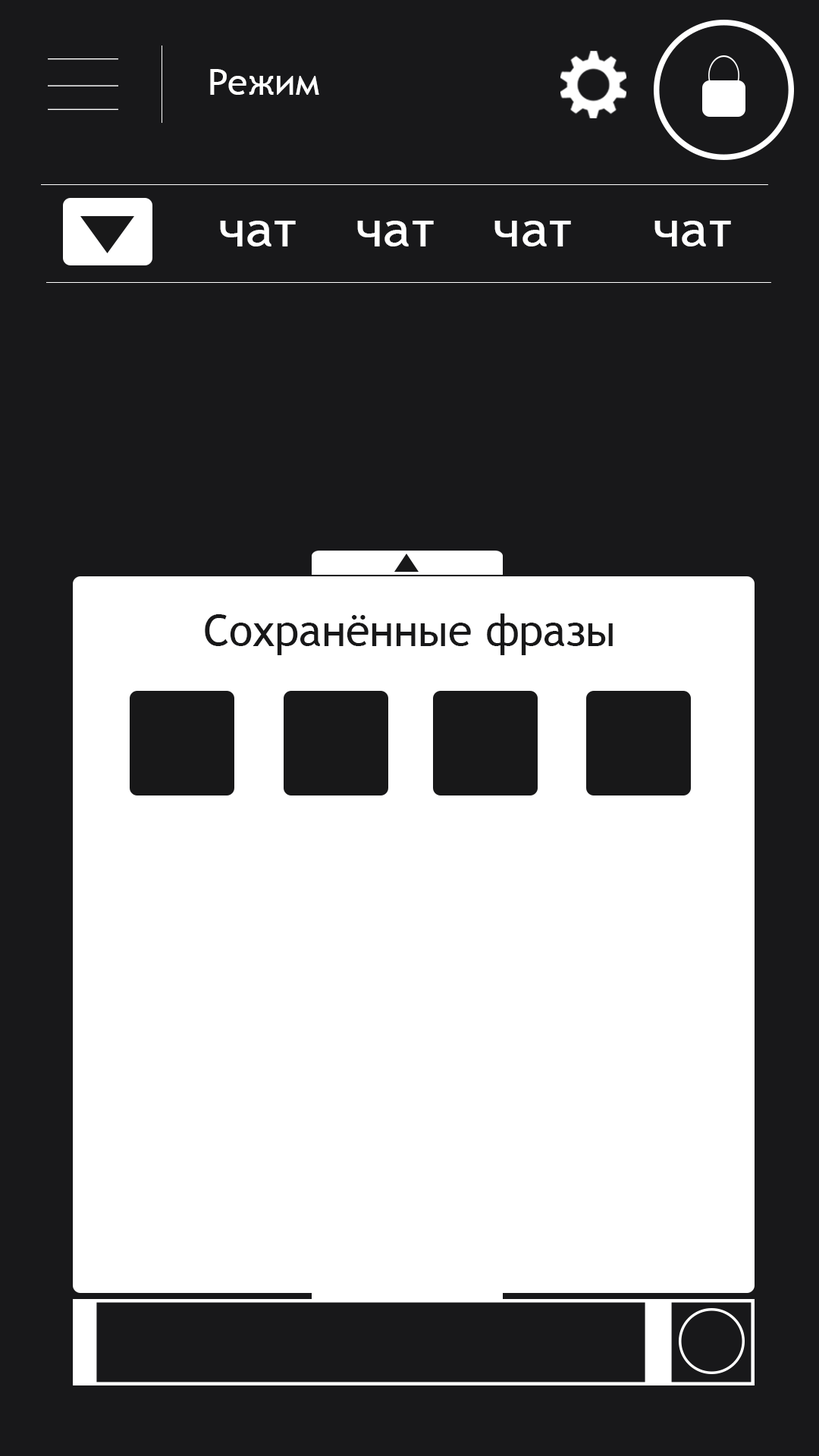
<style>
.page{position:relative;width:819px;height:1456px;background:#18181a}
.page>*{position:absolute;margin:0}
.t1{font:36.4px "TrebuchetMS";color:#ffffff}
.t2{font:49.3px "TrebuchetMS";color:#ffffff;scale:1.08 1}
.t3{font:43.6px "TrebuchetMS";color:#181819}
</style>
<div class="page">
<p class="t1" style="left:210px;top:69px;width:109px;height:26px">Режим</p>
<p class="t2" style="left:220px;top:221px;width:76px;height:25px">чат</p>
<p class="t2" style="left:357px;top:221px;width:77px;height:25px">чат</p>
<p class="t2" style="left:494px;top:221px;width:77px;height:25px">чат</p>
<p class="t2" style="left:654px;top:221px;width:77px;height:25px">чат</p>
<p class="t3" style="left:205px;top:613px;width:408px;height:42px">Сохранённые фразы</p>
</div>
